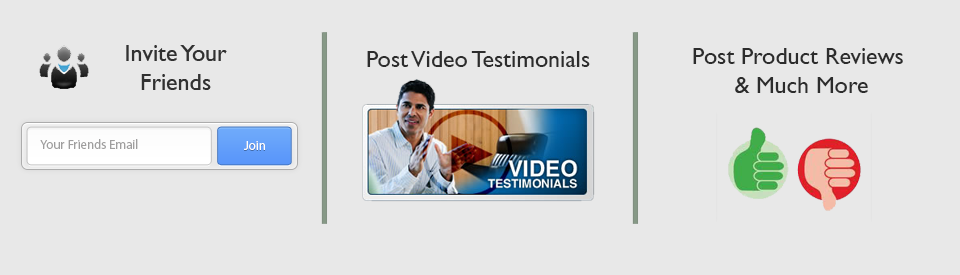
<style>
.page{position:relative;width:960px;height:275px;background:#e8e8e8}
.page>*{position:absolute;margin:0}
.t1{font:24px "GillSans";color:#2c2c2c}
.t2{font:12.9px "MyriadPro-Regular";color:#9f9e9e}
.t3{font:12.9px "MyriadPro-Regular";color:#ffffff}
</style>
<div class="page">
<p class="t1" style="left:367px;top:51px;width:223px;height:16px">Post Video Testimonials</p>
<p class="t1" style="left:693px;top:48px;width:210px;height:45px;text-align:center">Post Product Reviews<br> &amp; Much More</p>
<p class="t2" style="left:40px;top:139px;width:98px;height:10px">Your Friends Email</p>
<p class="t3" style="left:244px;top:141px;width:21px;height:9px">Join</p>
</div>
